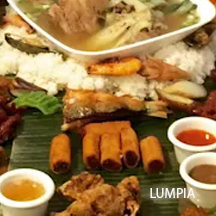
<style>
.page{position:relative;width:216px;height:216px}
.page>*{position:absolute;margin:0}
.t1{font:14px "MyriadPro-Regular";color:#f5f5f5}
</style>
<div class="page">
<p class="t1" style="left:150px;top:188px;width:45px;height:10px">LUMPIA</p>
</div>
